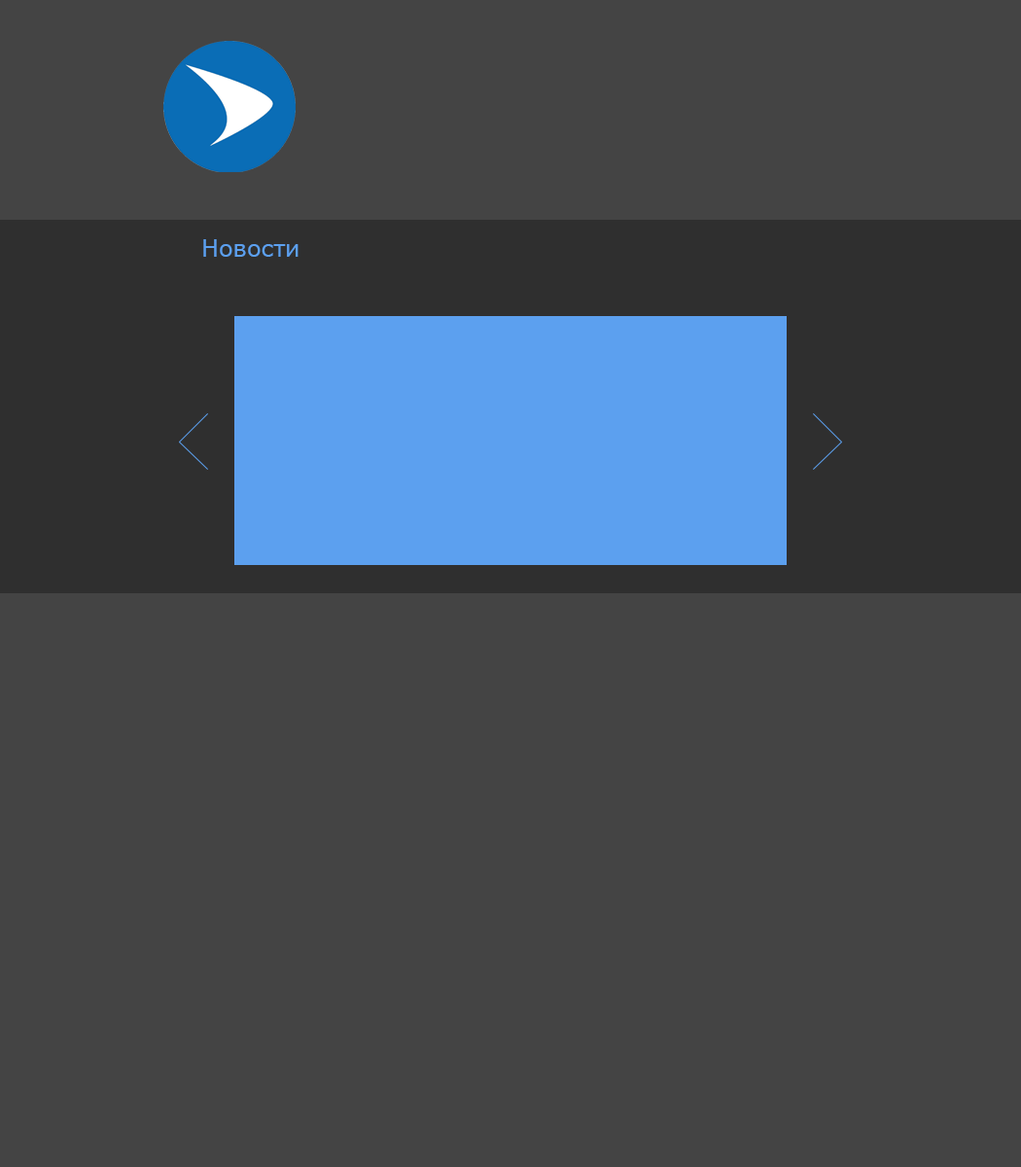
<style>
.page{position:relative;width:1021px;height:1167px;background:#444444}
.page>*{position:absolute;margin:0}
.t1{font:23.3px "Verdana";color:#5ca0ef}
</style>
<div class="page">
<p class="t1" style="left:203px;top:239px;width:96px;height:18px">Новости</p>
</div>
